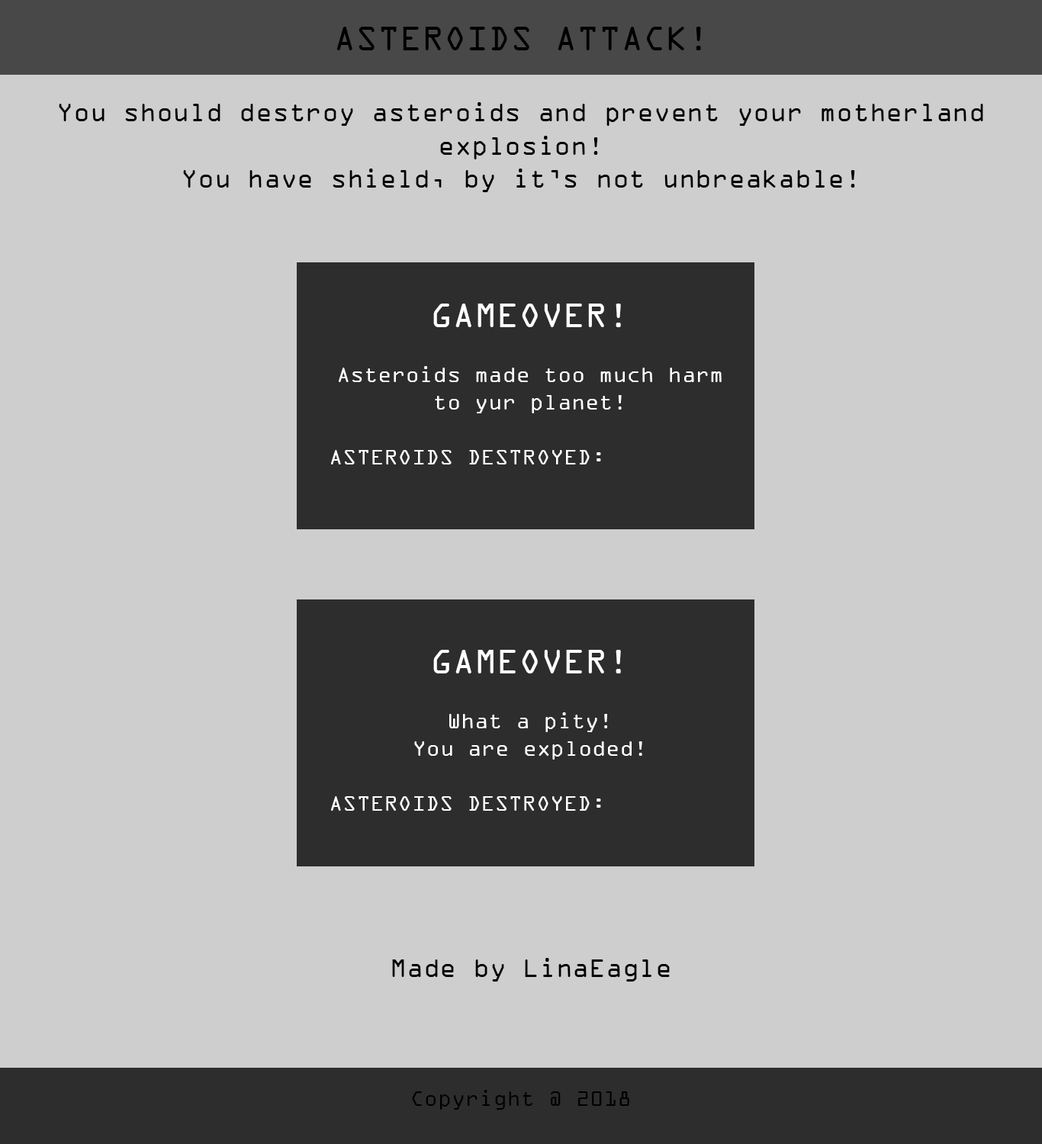
<style>
.page{position:relative;width:1042px;height:1144px;background:#cecece}
.page>*{position:absolute;margin:0}
.t1{font:36.6px "OCRAExtended";color:#000000}
.t2{font:27.5px "OCRAExtended";color:#000000}
.t3{font:22.9px "OCRAExtended";color:#ffffff}
.t4{font:36.6px "OCRAExtended";color:#ffffff}
.t5{font:22.9px "OCRAExtended";color:#000000}
</style>
<div class="page">
<p class="t1" style="left:336px;top:27px;width:365px;height:23px">ASTEROIDS ATTACK!</p>
<p class="t2" style="left:59px;top:102px;width:924px;height:90px;text-align:center">You should destroy asteroids and prevent your motherland explosion!<br>You have shield, by it’s not unbreakable!</p>
<p class="t3" style="left:331px;top:304px;width:391px;height:161px;text-align:center"><span class="t4">GAMEOVER!<br></span><br>Asteroids made too much harm to yur planet!<br><br>ASTEROIDS DESTROYED:</p>
<p class="t3" style="left:331px;top:650px;width:311px;height:161px;text-align:center"><span class="t4">GAMEOVER!<br></span><br>What a pity! <br>You are exploded!<br><br>ASTEROIDS DESTROYED:</p>
<p class="t2" style="left:392px;top:958px;width:278px;height:24px">Made by LinaEagle</p>
<p class="t5" style="left:412px;top:1090px;width:217px;height:20px">Copyright @ 2018</p>
</div>
